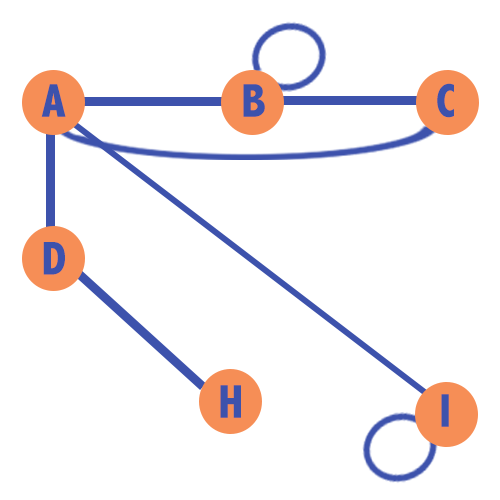
<style>
.page{position:relative;width:500px;height:500px;background:#ffffff}
.page>*{position:absolute;margin:0}
.t1{font:47.8px "AbadiMT-CondensedExtraBold";letter-spacing:0.075em;color:#3d52ac;scale:0.96 1}
</style>
<div class="page">
<p class="t1" style="left:41px;top:84px;width:25px;height:33px">A</p>
<p class="t1" style="left:243px;top:84px;width:22px;height:33px">B</p>
<p class="t1" style="left:437px;top:83px;width:17px;height:35px">C</p>
<p class="t1" style="left:43px;top:242px;width:22px;height:33px">D</p>
<p class="t1" style="left:220px;top:385px;width:21px;height:33px">H</p>
<p class="t1" style="left:441px;top:394px;width:8px;height:33px">I</p>
</div>
